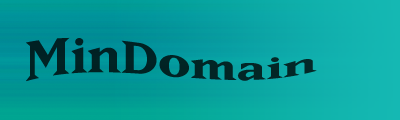
<style>
.page{position:relative;width:400px;height:120px}
.page>*{position:absolute;margin:0}
.t1{font:48px "ModMatrix";color:#002324;scale:1.33 1}
</style>
<div class="page">
<p class="t1" style="left:26px;top:37px;width:291px;height:45px">MinDomain</p>
</div>
